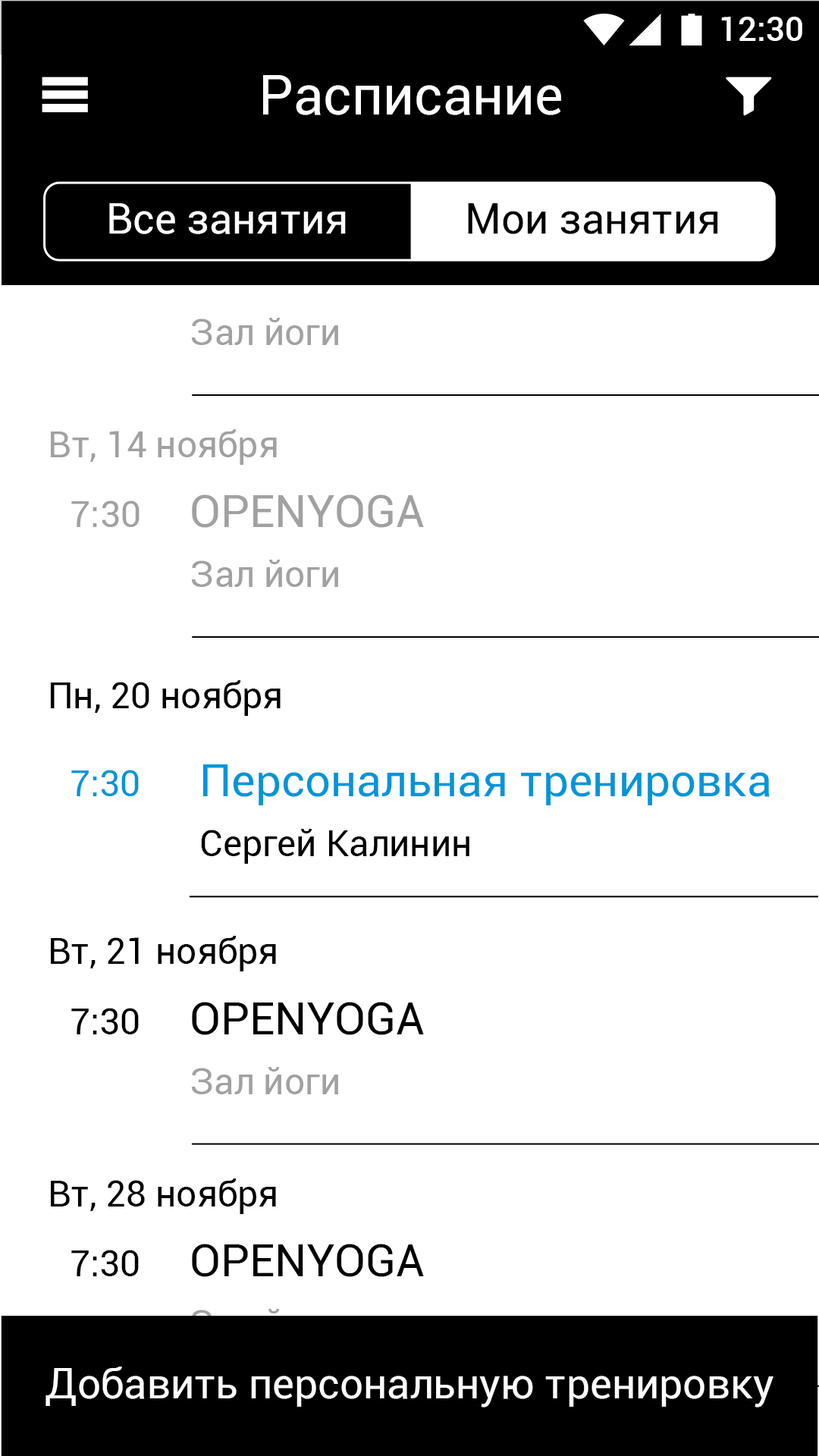
<style>
.page{position:relative;width:819px;height:1456px;background:#ffffff}
.page>*{position:absolute;margin:0}
.t1{font:33.4px "Roboto-Medium";color:#ffffff}
.t2{font:54.6px "Roboto-Regular";color:#ffffff}
.t3{font:41.7px "Roboto-Regular";color:#ffffff}
.t4{font:41.7px "Roboto-Regular";color:#000000}
.t5{font:36.4px "Roboto-Regular";color:#a1a1a1}
.t6{font:45.5px "Roboto-Regular";color:#a1a1a1}
.t7{font:36.4px "Roboto-Regular";color:#000000}
.t8{font:36.4px "Roboto-Regular";color:#0095d8}
.t9{font:45.5px "Roboto-Regular";color:#0095d8}
.t10{font:45.5px "Roboto-Regular";color:#000000}
</style>
<div class="page">
<p class="t1" style="left:721px;top:17px;width:81px;height:24px">12:30</p>
<p class="t2" style="left:263px;top:75px;width:298px;height:40px">Расписание</p>
<p class="t3" style="left:109px;top:203px;width:237px;height:31px">Все занятия</p>
<p class="t4" style="left:468px;top:203px;width:250px;height:31px">Мои занятия</p>
<p class="t5" style="left:191px;top:318px;width:147px;height:27px">Зал йоги</p>
<p class="t5" style="left:51px;top:429px;width:226px;height:36px">Вт, 14 ноября</p>
<p class="t6" style="left:192px;top:494px;width:232px;height:34px">OPENYOGA</p>
<p class="t5" style="left:71px;top:500px;width:69px;height:27px">7:30</p>
<p class="t5" style="left:191px;top:560px;width:147px;height:27px">Зал йоги</p>
<p class="t7" style="left:50px;top:680px;width:231px;height:36px">Пн, 20 ноября</p>
<p class="t8" style="left:71px;top:770px;width:68px;height:26px">7:30</p>
<p class="t9" style="left:202px;top:764px;width:568px;height:41px">Персональная тренировка</p>
<p class="t7" style="left:201px;top:829px;width:268px;height:35px">Сергей Калинин</p>
<p class="t7" style="left:51px;top:936px;width:225px;height:35px">Вт, 21 ноября</p>
<p class="t10" style="left:192px;top:1002px;width:232px;height:33px">OPENYOGA</p>
<p class="t7" style="left:71px;top:1008px;width:68px;height:26px">7:30</p>
<p class="t5" style="left:191px;top:1067px;width:147px;height:27px">Зал йоги</p>
<p class="t7" style="left:51px;top:1178px;width:225px;height:36px">Вт, 28 ноября</p>
<p class="t7" style="left:71px;top:1250px;width:68px;height:26px">7:30</p>
<p class="t10" style="left:192px;top:1244px;width:232px;height:33px">OPENYOGA</p>
<p class="t3" style="left:45px;top:1366px;width:728px;height:41px">Добавить персональную тренировку</p>
</div>
